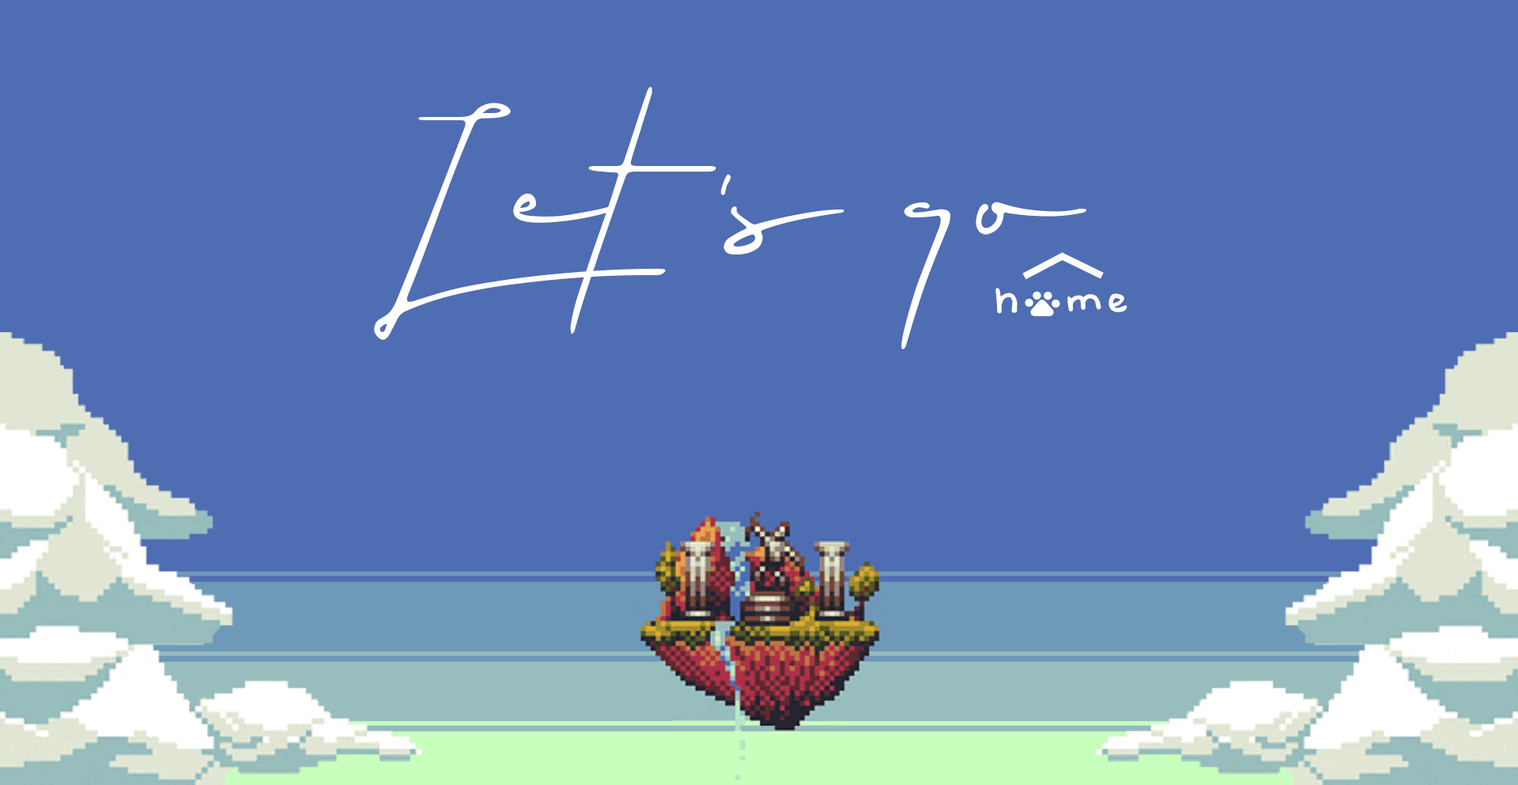
<style>
.page{position:relative;width:1518px;height:785px;background:#4f6db3}
.page>*{position:absolute;margin:0}
.t1{font:152.2px/59.8px "hellios";color:#ffffff}
.t2{font:152.2px/59.8px "GoldenHopesPERSONALUSEONLY-Regular";color:#ffffff}
.t3{font:42.2px "Baby-Doll";letter-spacing:0.08em;color:#ffffff}
</style>
<div class="page">
<p class="t1" style="left:374px;top:87px;width:713px;height:263px">Let <span class="t2">'</span>s go</p>
<p class="t3" style="left:996px;top:288px;width:132px;height:26px;rotate:-1deg">h   me</p>
</div>
